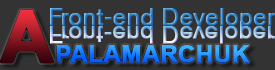
<style>
.page{position:relative;width:275px;height:70px;background:#333333}
.page>*{position:absolute;margin:0}
.t1{font:72px "Arial-BoldMT";font-weight:bold}
.t2{font:24px "HelveticaCE-Regular";font-weight:bold}
.t3{font:24.3px "HelveticaCE-Regular";font-weight:bold}
.t4{font:24px "Arial-BoldMT";font-weight:bold}
</style>
<div class="page">
<p class="t1" style="left:0px;top:10px;width:54px;height:53px">A</p>
<p class="t2" style="left:50px;top:8px;width:226px;height:23px">Front-end Developer</p>
<p class="t3" style="left:50px;top:21px;width:225px;height:23px">Front-end Developer</p>
<p class="t4" style="left:56px;top:45px;width:194px;height:18px">PALAMARCHUK</p>
</div>
